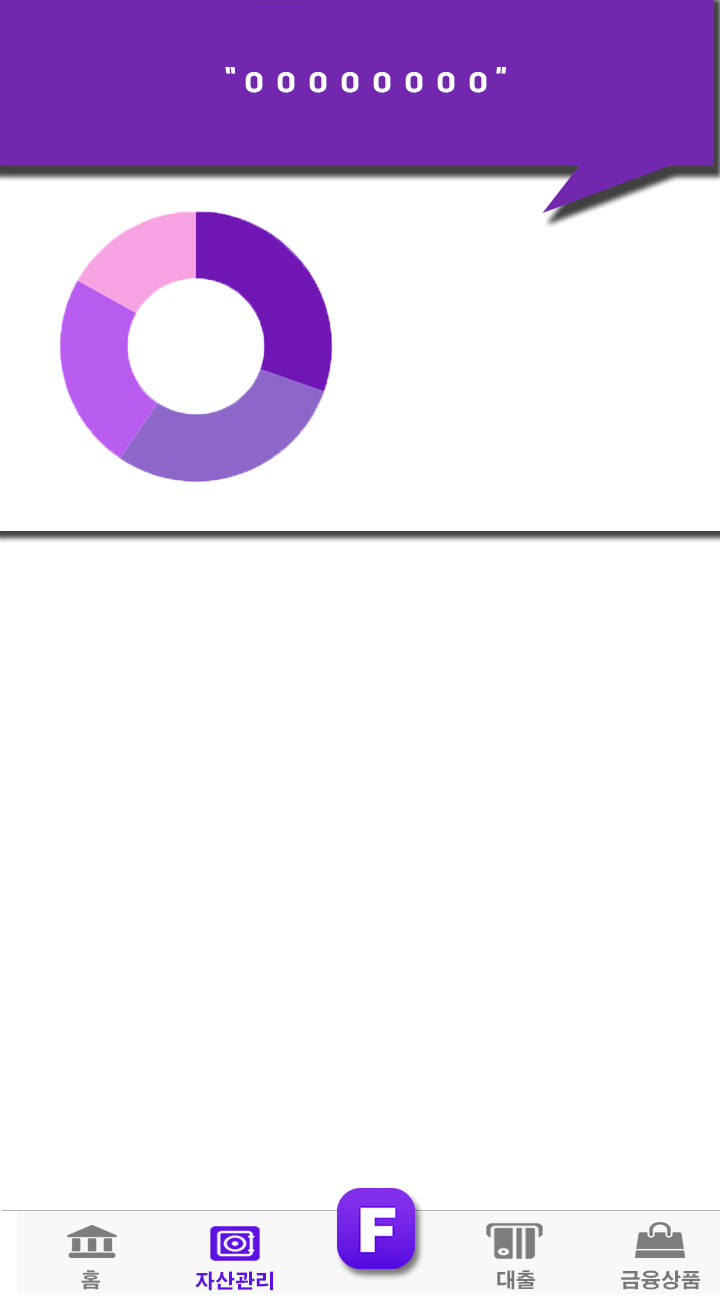
<style>
.page{position:relative;width:720px;height:1300px;background:#ffffff}
.page>*{position:absolute;margin:0}
.t1{font:30px "BMDoHyeon";letter-spacing:0.1em;color:#ffffff}
.t2{font:20px "H2gtrE";letter-spacing:0.01em;color:#7d7d7d}
.t3{font:20px "H2gtrE";letter-spacing:0.01em;color:#5d11e3}
.t4{font:20px "H2gtrE";letter-spacing:0.01em;color:#787779}
</style>
<div class="page">
<p class="t1" style="left:225px;top:67px;width:282px;height:26px">“ㅇㅇㅇㅇㅇㅇㅇㅇ”</p>
<p class="t2" style="left:81px;top:1270px;width:19px;height:20px">홈</p>
<p class="t3" style="left:195px;top:1271px;width:79px;height:20px">자산관리</p>
<p class="t4" style="left:497px;top:1270px;width:38px;height:20px">대출</p>
<p class="t4" style="left:621px;top:1270px;width:80px;height:20px">금융상품</p>
</div>
